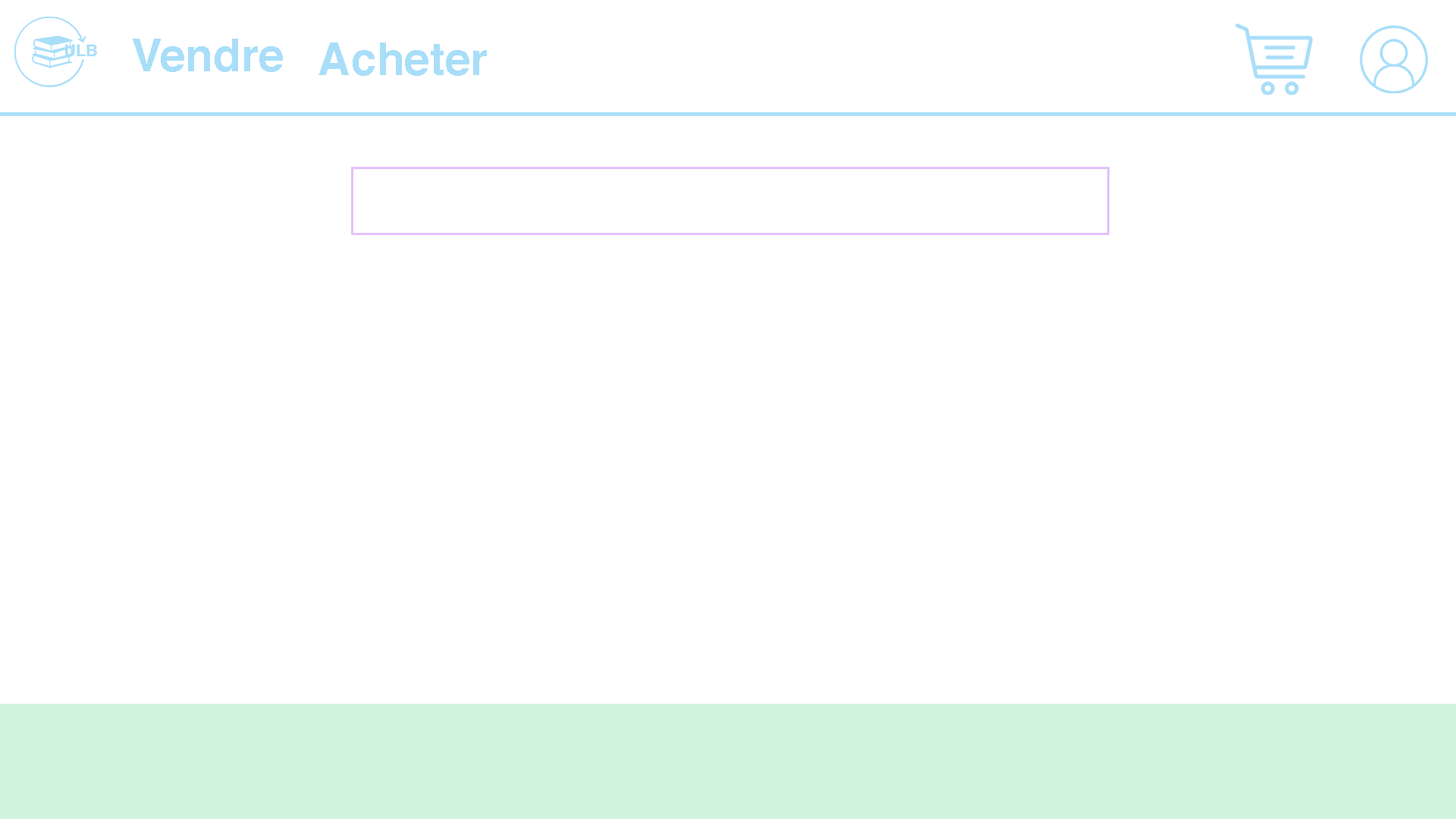
<style>
.page{position:relative;width:1456px;height:819px;background:#ffffff}
.page>*{position:absolute;margin:0}
.t1{font:45.5px "Helvetica-Bold";color:#a9def9}
</style>
<div class="page">
<p class="t1" style="left:133px;top:39px;width:150px;height:33px">Vendre</p>
<p class="t1" style="left:318px;top:42px;width:169px;height:34px">Acheter</p>
</div>
